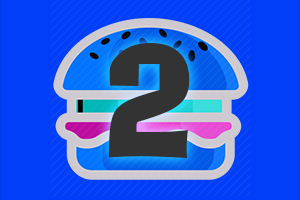
<style>
.page{position:relative;width:300px;height:200px;background:#013ef8}
.page>*{position:absolute;margin:0}
.t1{font:150px "AdLibBT-Regular";color:#333333;text-transform:uppercase}
</style>
<div class="page">
<p class="t1" style="left:108px;top:43px;width:82px;height:115px">2</p>
</div>
